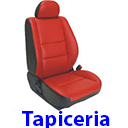
<style>
.page{position:relative;width:128px;height:128px;background:#ffffff}
.page>*{position:absolute;margin:0}
.t1{font:22px "MyriadPro-Bold";color:#0000ff}
</style>
<div class="page">
<p class="t1" style="left:22px;top:110px;width:88px;height:20px">Tapiceria</p>
</div>
